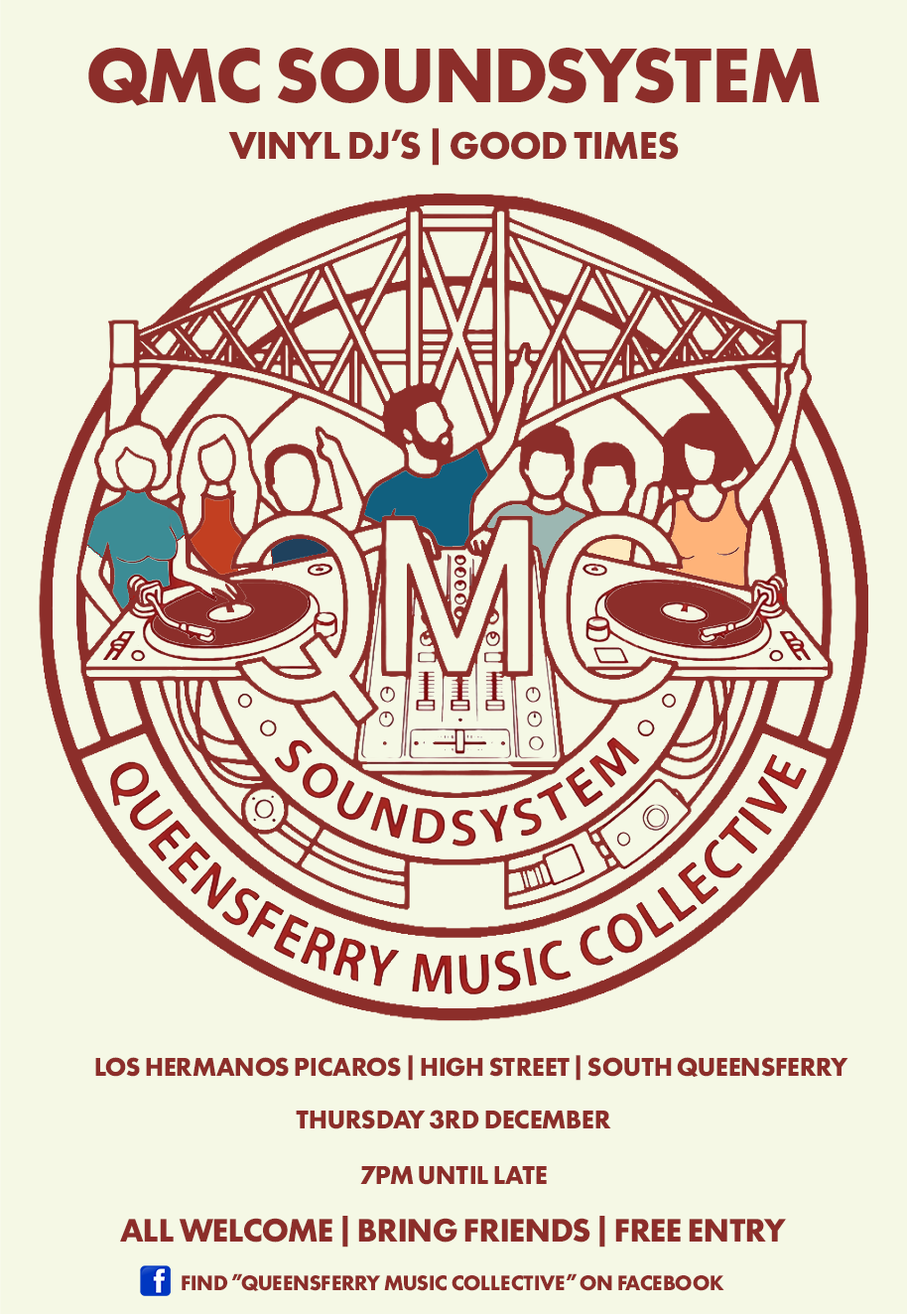
<style>
.page{position:relative;width:907px;height:1314px;background:#f5f8e5}
.page>*{position:absolute;margin:0}
.t1{font:71.2px "Futura100-Bold";color:#8c2e2a}
.t2{font:35.4px "Futura100-Bold";color:#8c2e2a}
.t3{font:23.8px "Futura100-Bold";color:#8c2e2a}
.t4{font:30.1px "Futura100-Bold";color:#8c2e2a}
.t5{font:19.5px "Futura100-Bold";color:#8c2e2a}
</style>
<div class="page">
<p class="t1" style="left:88px;top:48px;width:732px;height:58px">QMC SOUNDSYSTEM</p>
<p class="t2" style="left:228px;top:128px;width:451px;height:38px">VINYL DJ’S | GOOD TIMES</p>
<p class="t3" style="left:95px;top:1055px;width:754px;height:26px">LOS HERMANOS PICAROS | HIGH STREET | SOUTH QUEENSFERRY</p>
<p class="t3" style="left:296px;top:1110px;width:315px;height:20px">THURSDAY 3RD DECEMBER</p>
<p class="t3" style="left:360px;top:1166px;width:187px;height:19px">7PM UNTIL LATE</p>
<p class="t4" style="left:120px;top:1216px;width:667px;height:32px">ALL WELCOME | BRING FRIENDS | FREE ENTRY</p>
<p class="t5" style="left:182px;top:1274px;width:543px;height:17px">FIND ”QUEENSFERRY MUSIC COLLECTIVE” ON FACEBOOK</p>
</div>
